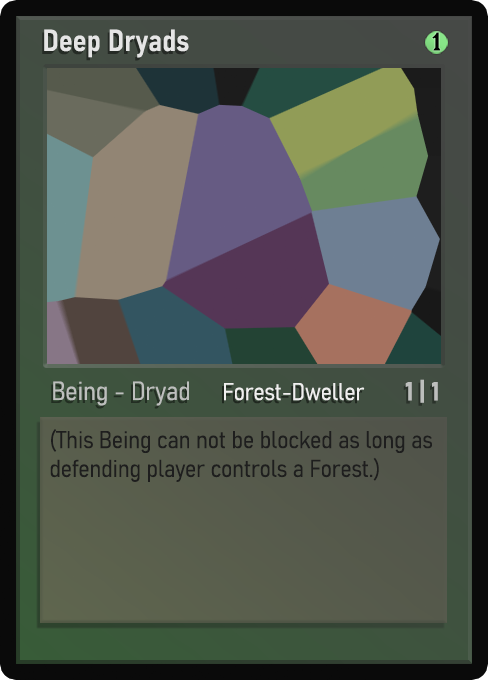
<style>
.page{position:relative;width:488px;height:680px}
.page>*{position:absolute;margin:0}
.t1{font:30px "Bahnschrift-SemiBoldSemiCondensed";color:#f2f2f2;font-weight:bold}
.t2{font:25px "WTRRoycroft";color:#000000;font-weight:bold;scale:1.09 1}
.t3{font:26px "Bahnschrift-LightSemiCondensed";color:#c8c8c8;font-weight:bold}
.t4{font:24px "Bahnschrift-LightSemiCondensed";color:#f0efef;font-weight:bold}
.t5{font:26px "Bahnschrift-BoldSemiCondensed";color:#bdbfbd;font-weight:bold}
.t6{font:24px "Bahnschrift-LightSemiCondensed";color:#1e1e1e;font-weight:bold}
</style>
<div class="page">
<p class="t1" style="left:44px;top:29px;width:145px;height:29px;opacity:0.9">Deep Dryads</p>
<p class="t2" style="left:432px;top:32px;width:9px;height:19px">1</p>
<p class="t3" style="left:53px;top:381px;width:136px;height:25px;opacity:0.9">Being - Dryad</p>
<p class="t4" style="left:224px;top:383px;width:141px;height:18px">Forest-Dweller</p>
<p class="t5" style="left:405px;top:379px;width:33px;height:24px">1 | 1</p>
<p class="t6" style="left:50px;top:429px;width:382px;height:53px">(This Being can not be blocked as long as defending player controls a Forest.)</p>
</div>
